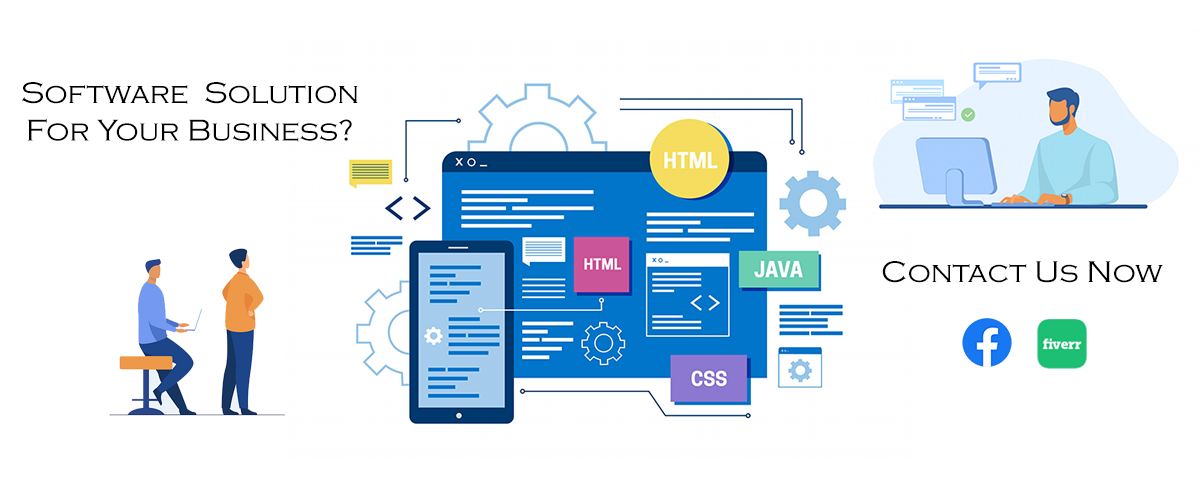
<style>
.page{position:relative;width:1200px;height:500px;background:#ffffff}
.page>*{position:absolute;margin:0}
.t1{font:31.2px "CopperplateGothic-Light";color:#000000}
</style>
<div class="page">
<p class="t1" style="left:22px;top:82px;width:336px;height:60px;text-align:center">Software  Solution<br>For Your Business?</p>
<p class="t1" style="left:882px;top:261px;width:281px;height:22px">Contact Us Now</p>
</div>
